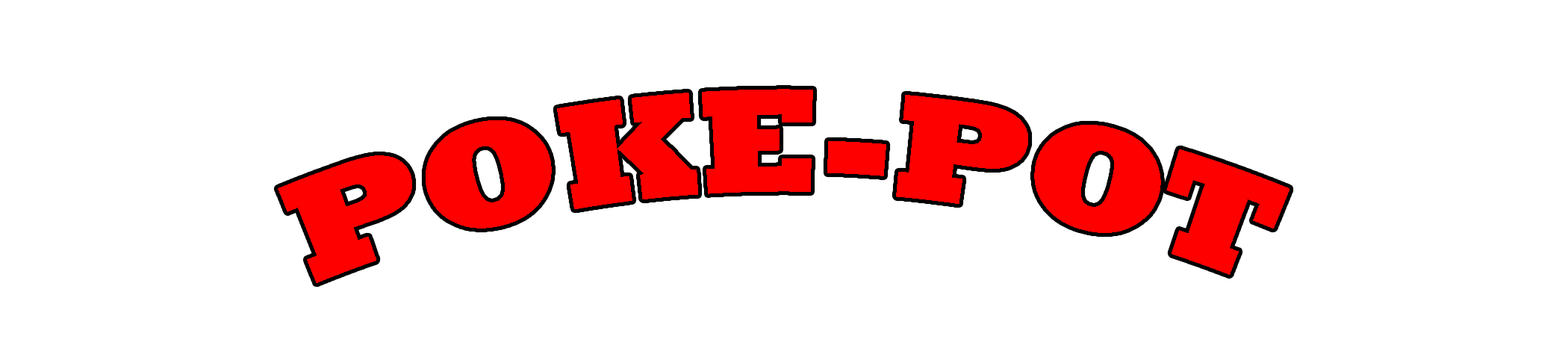
<style>
.page{position:relative;width:1568px;height:354px;background:#ffffff}
.page>*{position:absolute;margin:0}
.t1{font:149.3px "Rockwell-ExtraBold";color:#ff0000}
</style>
<div class="page">
<p class="t1" style="left:278px;top:89px;width:1011px;height:194px">POKE-POT</p>
</div>
